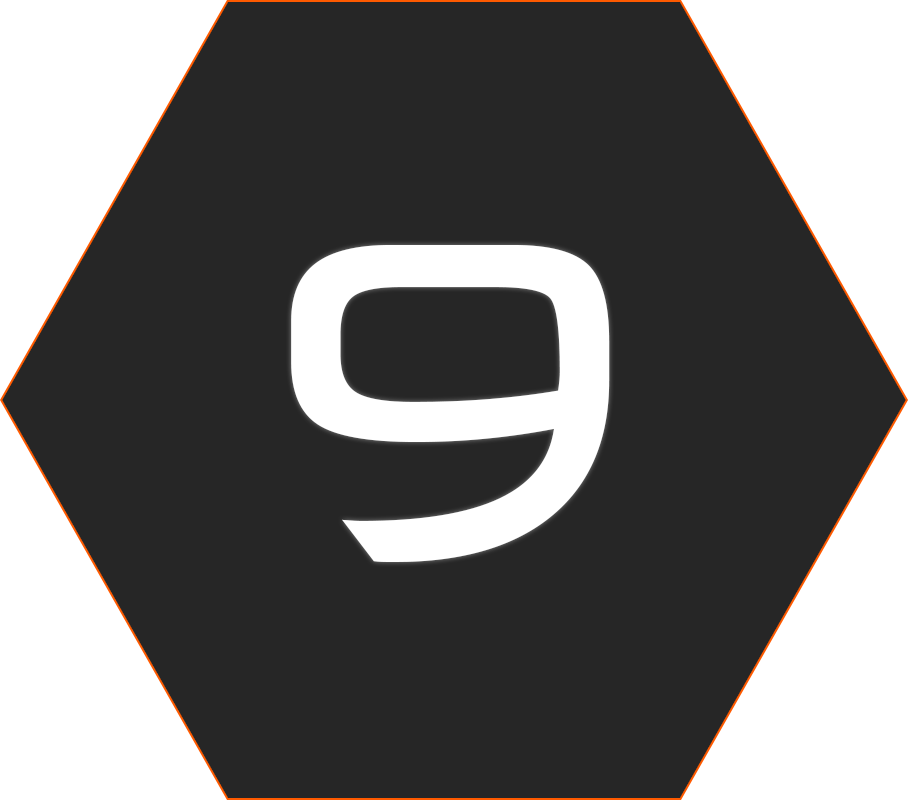
<style>
.page{position:relative;width:908px;height:800px;background:#262626}
.page>*{position:absolute;margin:0}
.t1{font:600px "BankGothicBT-Light";color:#ffffff}
</style>
<div class="page">
<p class="t1" style="left:291px;top:245px;width:319px;height:317px">9</p>
</div>
